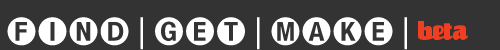
<style>
.page{position:relative;width:500px;height:50px;background:#333333}
.page>*{position:absolute;margin:0}
.t1{font:31.6px "PiOneFiveFiveZero";letter-spacing:-0.01em;color:#ffffff}
.t2{font:23px "EinhornICG";letter-spacing:-0.01em;color:#ef3f23}
</style>
<div class="page">
<p class="t1" style="left:7px;top:17px;width:400px;height:33px">FIND - GET - MAKE -</p>
<p class="t2" style="left:418px;top:21px;width:50px;height:19px">beta</p>
</div>
